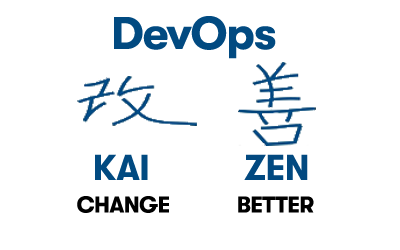
<style>
.page{position:relative;width:400px;height:250px;background:#ffffff}
.page>*{position:absolute;margin:0}
.t1{font:45.6px "GTWalsheim-Bold";letter-spacing:-0.02em;color:#014a81}
.t2{font:35.6px "GTWalsheim-Bold";letter-spacing:-0.02em;color:#014a81}
.t3{font:35.6px "GTWalsheim-Bold";letter-spacing:-0.02em;color:#024980}
.t4{font:22.6px "GTWalsheim-Bold";letter-spacing:-0.02em;color:#000000}
</style>
<div class="page">
<p class="t1" style="left:114px;top:16px;width:162px;height:43px">DevOps</p>
<p class="t2" style="left:95px;top:154px;width:53px;height:26px">KAI</p>
<p class="t3" style="left:244px;top:154px;width:64px;height:26px">ZEN</p>
<p class="t4" style="left:77px;top:196px;width:92px;height:17px">CHANGE</p>
<p class="t4" style="left:238px;top:196px;width:76px;height:17px">BETTER</p>
</div>
